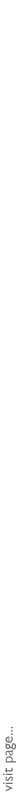
<style>
.page{position:relative;width:20px;height:800px;background:#ffffff}
.page>*{position:absolute;margin:0}
.t1{font:15px "GillSans";color:#6d6d6d}
</style>
<div class="page">
<p class="t1" style="left:3px;top:726px;width:13px;height:66px;rotate:-90deg">visit page...</p>
</div>
